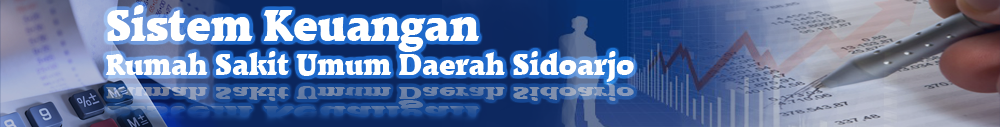
<style>
.page{position:relative;width:1000px;height:127px}
.page>*{position:absolute;margin:0}
.t1{font:28px "Plumb";color:#fffffe}
.t2{font:41.9px "Plumb";color:#fffffe}
</style>
<div class="page">
<p class="t1" style="left:105px;top:5px;width:529px;height:77px"><span class="t2">Sistem Keuangan<br></span>Rumah Sakit Umum Daerah Sidoarjo</p>
</div>
